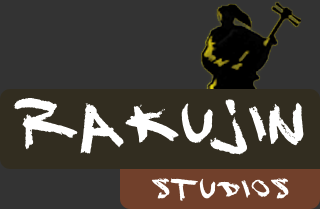
<style>
.page{position:relative;width:320px;height:209px;background:#333333}
.page>*{position:absolute;margin:0}
.t1{font:60px "DJ-Gross";color:#ffffff}
.t2{font:30px "DJ-Gross";color:#ffffff}
</style>
<div class="page">
<p class="t1" style="left:13px;top:98px;width:291px;height:57px">rakujin</p>
<p class="t2" style="left:151px;top:177px;width:138px;height:24px">studios</p>
</div>
